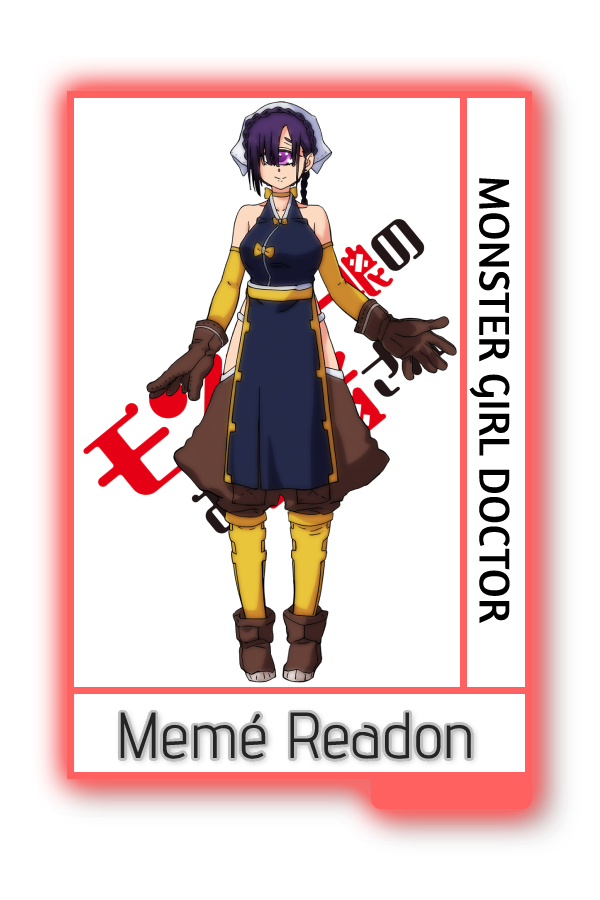
<style>
.page{position:relative;width:600px;height:900px;background:#ffffff}
.page>*{position:absolute;margin:0}
.t1{font:44px "Amaranth-Regular";color:#000000}
.t2{font:65px "AdventPro-Regular";color:#252525}
</style>
<div class="page">
<p class="t1" style="left:469px;top:178px;width:41px;height:446px;rotate:90deg">MONSTER GIRL DOCTOR</p>
<p class="t2" style="left:120px;top:712px;width:351px;height:47px">Memé Readon</p>
</div>
